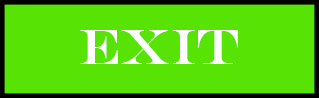
<style>
.page{position:relative;width:319px;height:98px;background:#57e405}
.page>*{position:absolute;margin:0}
.t1{font:50px "EngraversMT";color:#fefefe}
</style>
<div class="page">
<p class="t1" style="left:80px;top:30px;width:158px;height:34px">EXIT</p>
</div>
